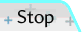
<style>
.page{position:relative;width:82px;height:32px;background:#eeeeee}
.page>*{position:absolute;margin:0}
.t1{font:18.7px "Amira-Roman";color:#000000}
</style>
<div class="page">
<p class="t1" style="left:17px;top:10px;width:37px;height:18px;opacity:0.96">Stop</p>
</div>
